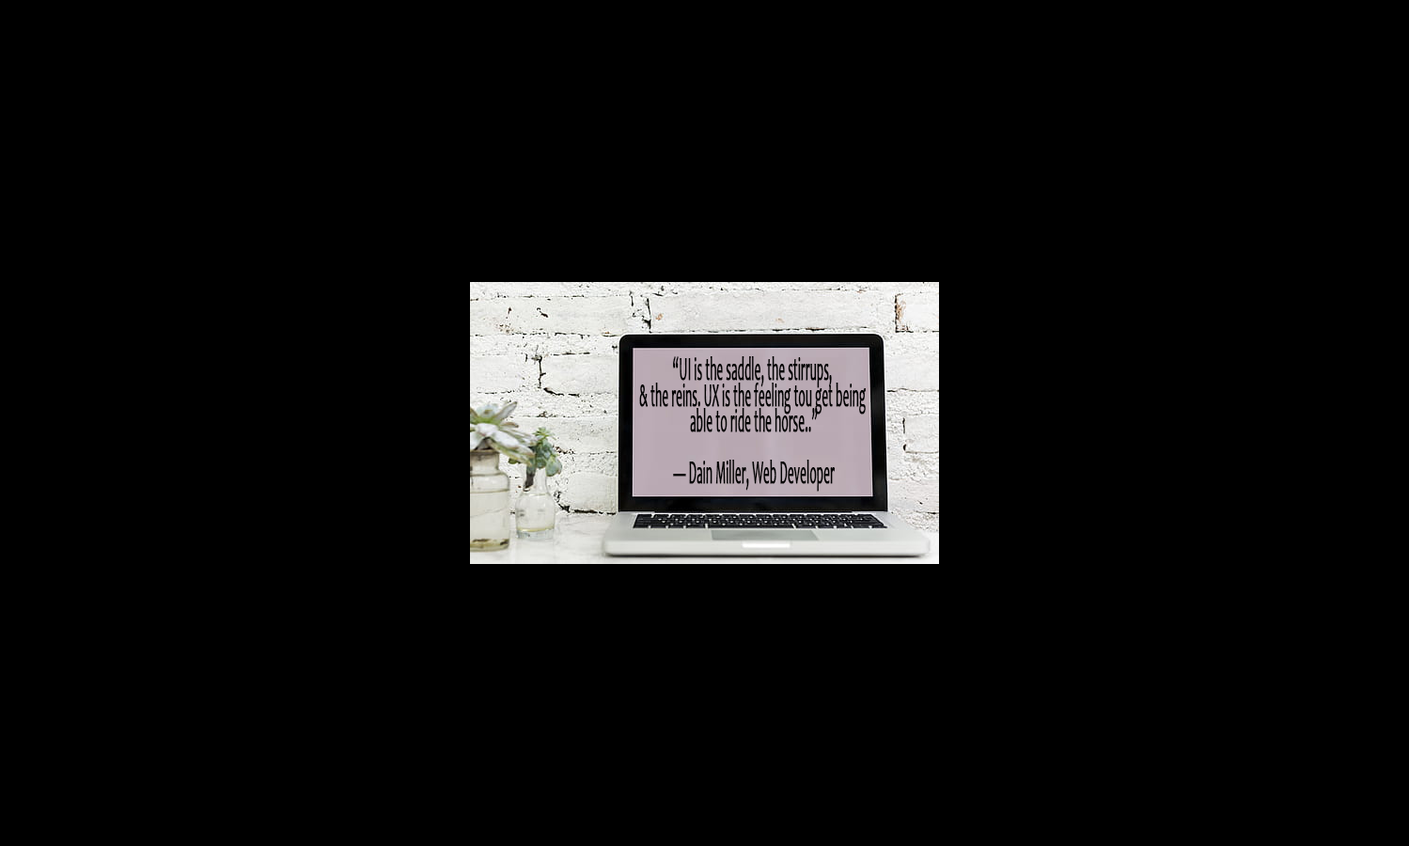
<style>
.page{position:relative;width:1409px;height:846px;background:#000000}
.page>*{position:absolute;margin:0}
.t1{font:21.6px "Candara";color:#000000;font-weight:bold;scale:0.35 1}
</style>
<div class="page">
<p class="t1" style="left:639px;top:356px;width:227px;height:136px;text-align:center">“UI is the saddle, the stirrups, <br>&amp; the reins. UX is the feeling tou get being <br>able to ride the horse..”<br><br>— Dain Miller, Web Developer</p>
</div>
